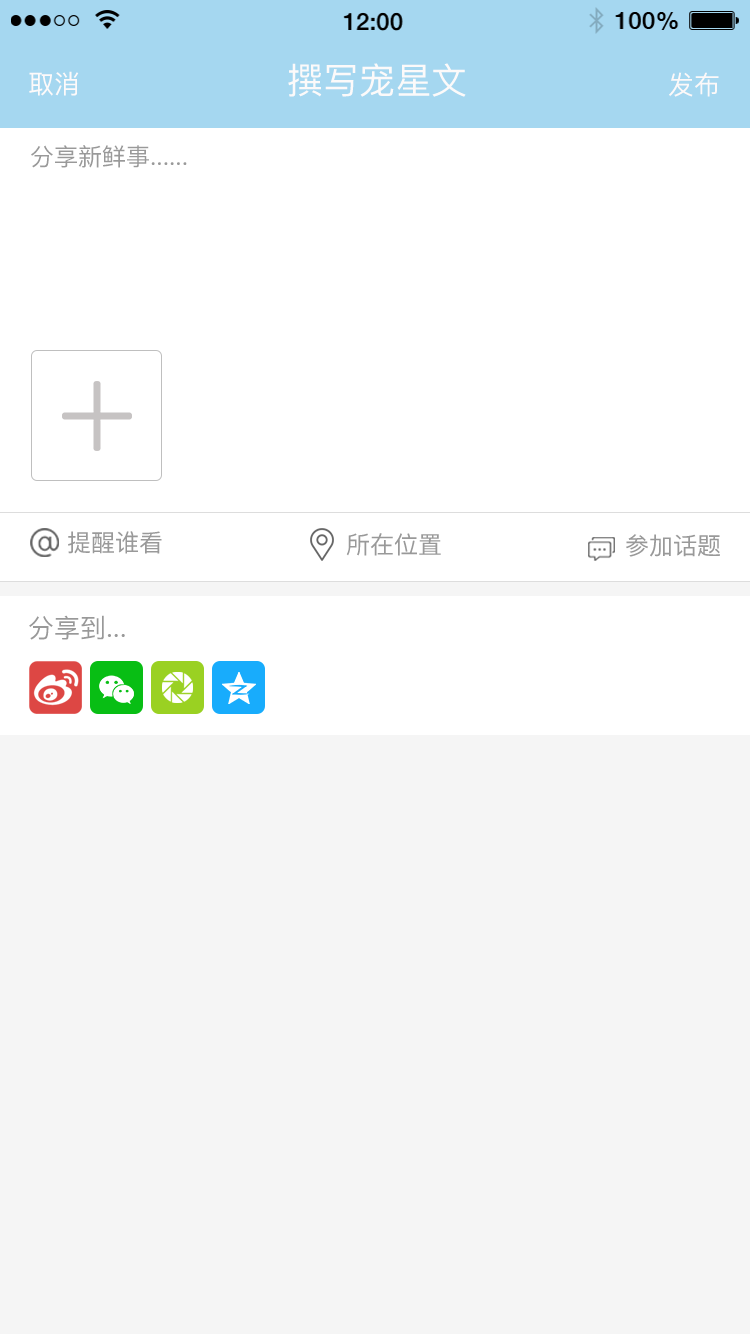
<style>
.page{position:relative;width:750px;height:1334px;background:#f5f5f5}
.page>*{position:absolute;margin:0}
.t1{font:36px "PingFangSC-Regular";color:#fcfafa}
.t2{font:26px "PingFangSC-Regular";color:#fdfafa}
.t3{font:26px "PingFangSC-Regular";color:#fcf9f9}
.t4{font:24px "PingFangSC-Regular";color:#999999}
.t5{font:24px "PingFangSC";color:#999999}
.t6{font:26px "PingFangSC-Regular";color:#999999}
</style>
<div class="page">
<p class="t1" style="left:288px;top:63px;width:178px;height:34px">撰写宠星文</p>
<p class="t2" style="left:29px;top:71px;width:50px;height:25px">取消</p>
<p class="t3" style="left:669px;top:72px;width:50px;height:25px">发布</p>
<p class="t4" style="left:31px;top:145px;width:156px;height:23px">分享新鲜事......</p>
<p class="t5" style="left:68px;top:531px;width:94px;height:23px">提醒谁看</p>
<p class="t5" style="left:346px;top:533px;width:95px;height:23px">所在位置</p>
<p class="t5" style="left:626px;top:534px;width:94px;height:23px">参加话题</p>
<p class="t6" style="left:29px;top:615px;width:96px;height:25px">分享到...</p>
</div>
